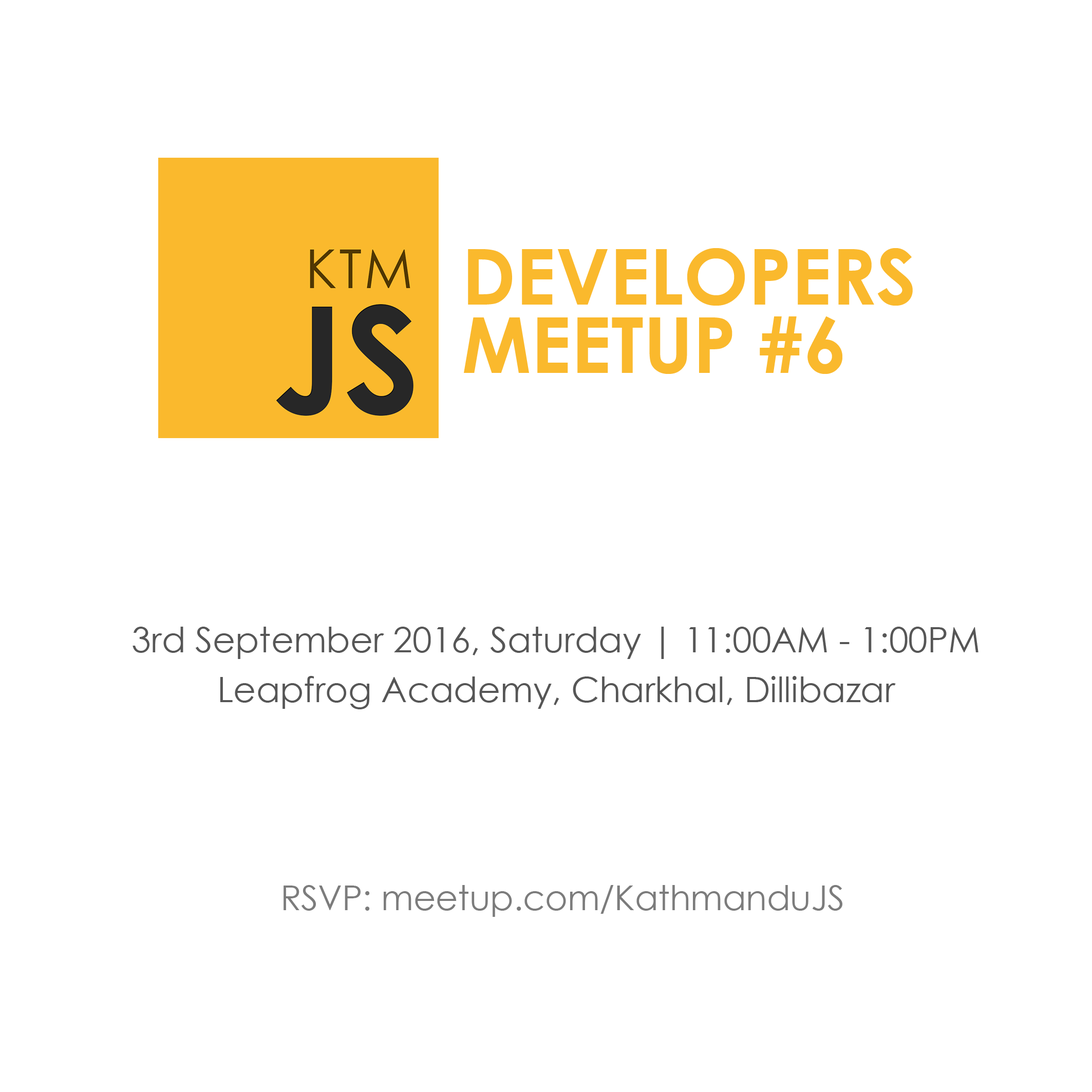
<style>
.page{position:relative;width:1092px;height:1092px;background:#ffffff}
.page>*{position:absolute;margin:0}
.t1{font:77px/68.5px "CenturyGothic-Bold";color:#fab92d}
.t2{font:34.9px/49.9px "CenturyGothic";color:#565656}
.t3{font:34.2px "CenturyGothic";color:#7c7c7c}
</style>
<div class="page">
<p class="t1" style="left:464px;top:248px;width:449px;height:126px">DEVELOPERS<br>MEETUP #6</p>
<p class="t2" style="left:133px;top:627px;width:845px;height:82px;text-align:center">3rd September 2016, Saturday | 11:00AM - 1:00PM<br>Leapfrog Academy, Charkhal, Dillibazar</p>
<p class="t3" style="left:284px;top:885px;width:558px;height:32px">RSVP: meetup.com/KathmanduJS</p>
</div>
